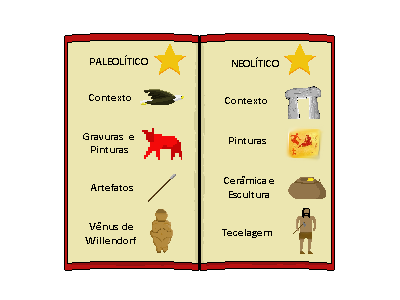
<style>
.page{position:relative;width:400px;height:300px;background:#ffffff}
.page>*{position:absolute;margin:0}
.t1{font:11px "Calibri-Bold";color:#010101}
.t2{font:11px "Calibri-Bold";color:#000000}
</style>
<div class="page">
<p class="t1" style="left:90px;top:55px;width:58px;height:10px">PALEOLÍTICO</p>
<p class="t1" style="left:232px;top:57px;width:47px;height:10px">NEOLÍTICO</p>
<p class="t1" style="left:89px;top:94px;width:42px;height:7px">Contexto</p>
<p class="t2" style="left:225px;top:97px;width:42px;height:7px">Contexto</p>
<p class="t1" style="left:83px;top:133px;width:51px;height:20px;text-align:center">Gravuras   e <br>Pinturas</p>
<p class="t2" style="left:229px;top:137px;width:37px;height:7px">Pinturas</p>
<p class="t2" style="left:91px;top:184px;width:42px;height:7px">Artefatos</p>
<p class="t2" style="left:224px;top:176px;width:50px;height:22px;text-align:center">Cerâmica e Escultura</p>
<p class="t1" style="left:85px;top:222px;width:51px;height:22px;text-align:center">Vênus  de <br>Willendorf</p>
<p class="t2" style="left:222px;top:229px;width:50px;height:9px">Tecelagem</p>
</div>
